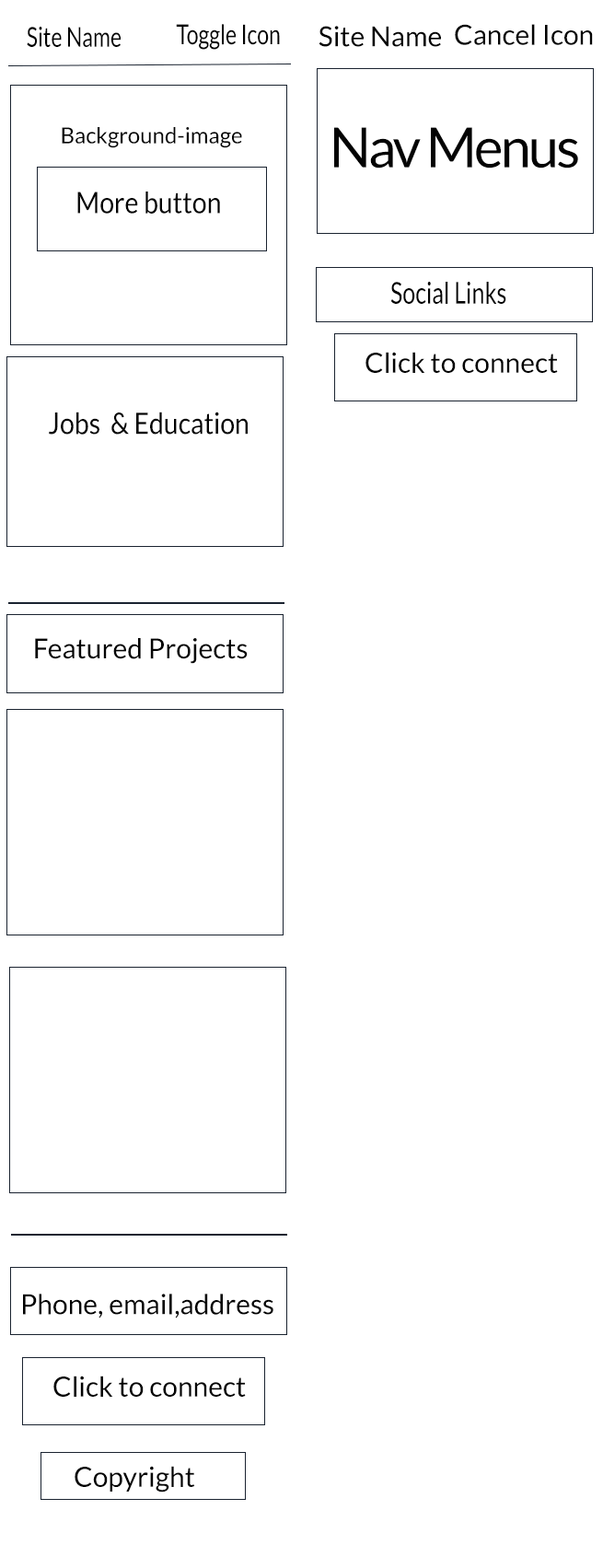
<style>
.page{position:relative;width:603px;height:1568px;background:#ffffff}
.page>*{position:absolute;margin:0}
.t1{font:27.6px "Lato-Regular";color:#030303;scale:0.77 1}
.t2{font:27.6px "Lato-Regular";color:#030303}
.t3{font:22.1px "Lato-Regular";color:#030303}
.t4{font:55.2px "Lato-Regular";letter-spacing:-0.05em;color:#030303}
.t5{font:29.6px "Lato-Regular";color:#030303;scale:0.89 1}
.t6{font:29.6px "Lato-Regular";color:#030303;scale:0.78 1}
</style>
<div class="page">
<p class="t1" style="left:27px;top:27px;width:94px;height:20px">Site Name</p>
<p class="t1" style="left:176px;top:24px;width:104px;height:26px">Toggle Icon</p>
<p class="t2" style="left:319px;top:26px;width:122px;height:21px">Site Name</p>
<p class="t2" style="left:455px;top:24px;width:138px;height:21px">Cancel Icon</p>
<p class="t3" style="left:62px;top:127px;width:180px;height:21px">Background-image</p>
<p class="t4" style="left:334px;top:127px;width:244px;height:41px">Nav Menus</p>
<p class="t5" style="left:77px;top:192px;width:143px;height:22px">More button</p>
<p class="t6" style="left:390px;top:282px;width:116px;height:22px">Social Links</p>
<p class="t2" style="left:366px;top:352px;width:192px;height:21px">Click to connect</p>
<p class="t5" style="left:49px;top:412px;width:199px;height:23px">Jobs  &amp; Education</p>
<p class="t2" style="left:35px;top:638px;width:213px;height:26px">Featured Projects</p>
<p class="t2" style="left:23px;top:1294px;width:250px;height:24px">Phone, email,address</p>
<p class="t2" style="left:53px;top:1376px;width:193px;height:21px">Click to connect</p>
<p class="t2" style="left:75px;top:1466px;width:120px;height:27px">Copyright</p>
</div>
